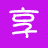
<style>
.page{position:relative;width:48px;height:48px;background:#c613ec}
.page>*{position:absolute;margin:0}
.t1{font:35px "ARTianniuB5-Bold";color:#fcfdfc}
</style>
<div class="page">
<p class="t1" style="left:9px;top:7px;width:30px;height:31px">享</p>
</div>
